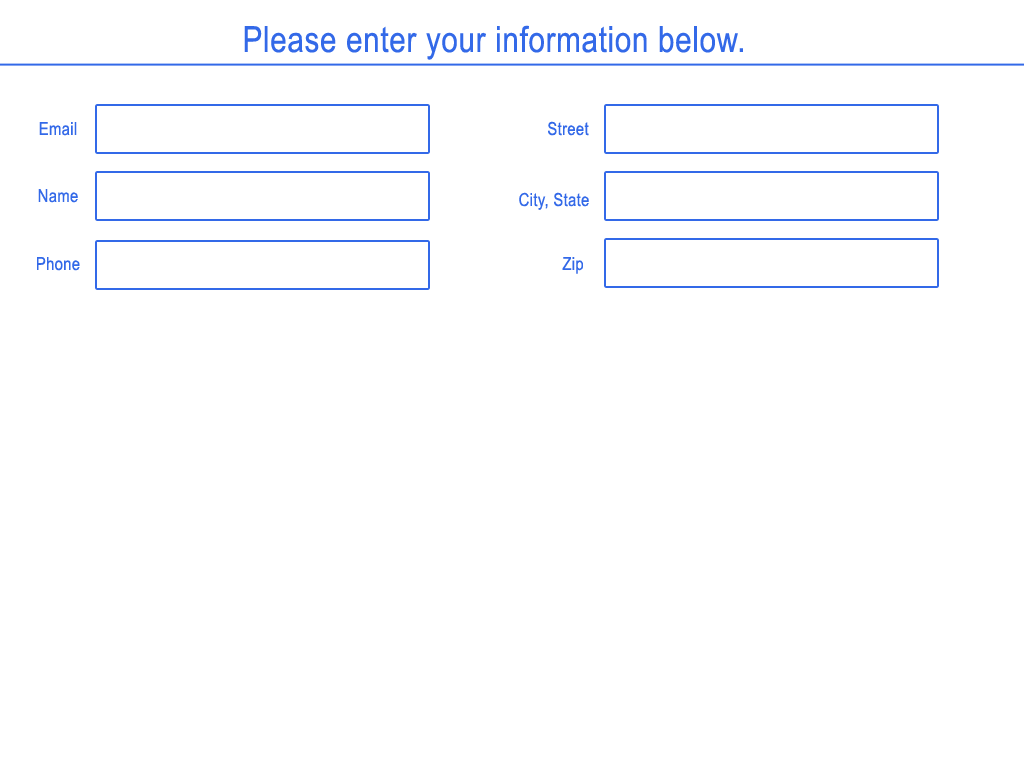
<style>
.page{position:relative;width:1024px;height:768px;background:#ffffff}
.page>*{position:absolute;margin:0}
.t1{font:36px "ArialNarrow";letter-spacing:0.02em;color:#3369e8}
.t2{font:18px "ArialNarrow";letter-spacing:0.02em;color:#3369e8}
</style>
<div class="page">
<p class="t1" style="left:244px;top:25px;width:499px;height:35px">Please enter your information below.</p>
<p class="t2" style="left:39px;top:122px;width:38px;height:14px">Email</p>
<p class="t2" style="left:548px;top:121px;width:41px;height:15px">Street</p>
<p class="t2" style="left:38px;top:189px;width:40px;height:14px">Name</p>
<p class="t2" style="left:519px;top:192px;width:70px;height:18px">City, State</p>
<p class="t2" style="left:37px;top:257px;width:43px;height:14px">Phone</p>
<p class="t2" style="left:562px;top:257px;width:21px;height:17px">Zip</p>
</div>
